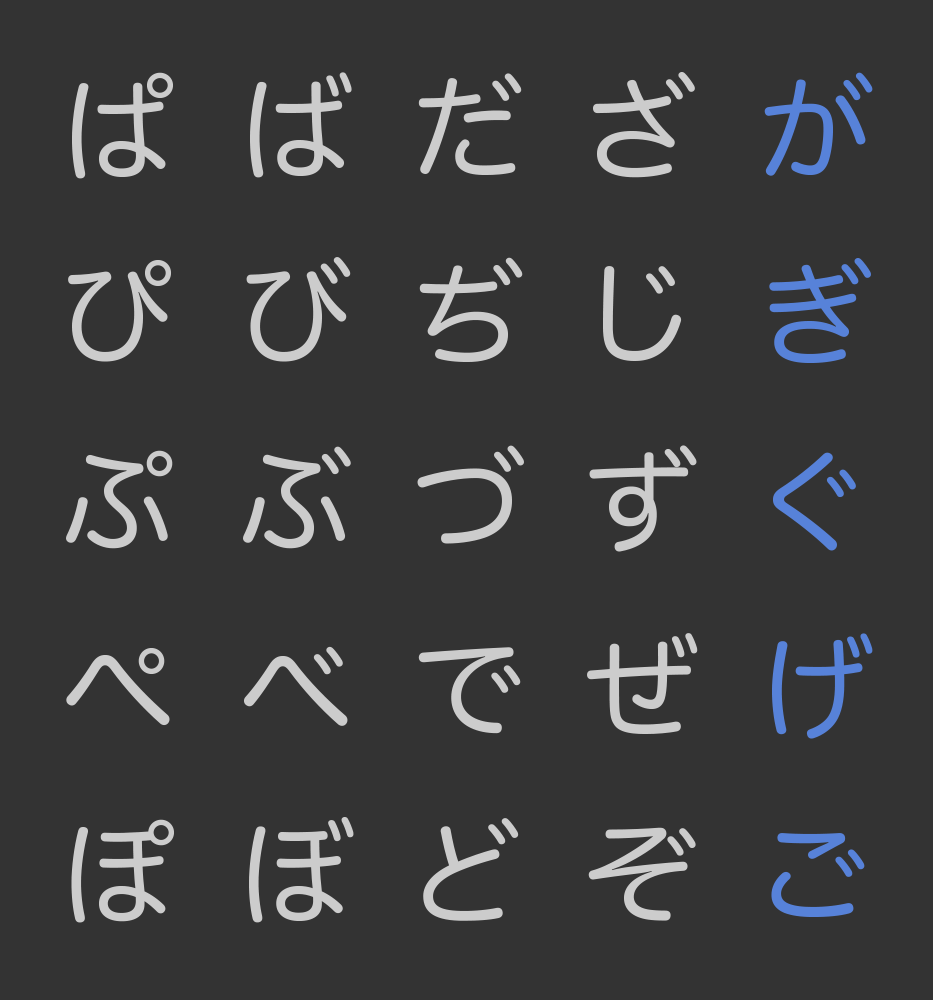
<style>
.page{position:relative;width:933px;height:1000px;background:#333333}
.page>*{position:absolute;margin:0}
.t1{font:113.7px "HiraMaruPro-W4";letter-spacing:0.025em;color:#cccccc}
.t2{font:113.7px "HiraMaruPro-W4";letter-spacing:0.025em;color:#5782d9}
</style>
<div class="page">
<p class="t1" style="left:72px;top:72px;width:102px;height:107px">ぱ</p>
<p class="t1" style="left:250px;top:72px;width:102px;height:106px">ば</p>
<p class="t1" style="left:418px;top:73px;width:104px;height:102px">だ</p>
<p class="t1" style="left:593px;top:72px;width:102px;height:106px">ざ</p>
<p class="t2" style="left:764px;top:72px;width:109px;height:104px">が</p>
<p class="t1" style="left:246px;top:257px;width:105px;height:105px">び</p>
<p class="t1" style="left:419px;top:257px;width:104px;height:105px">ぢ</p>
<p class="t1" style="left:68px;top:260px;width:104px;height:102px">ぴ</p>
<p class="t1" style="left:603px;top:266px;width:79px;height:95px">じ</p>
<p class="t2" style="left:769px;top:258px;width:102px;height:105px">ぎ</p>
<p class="t1" style="left:243px;top:446px;width:108px;height:103px">ぶ</p>
<p class="t1" style="left:417px;top:445px;width:107px;height:99px">づ</p>
<p class="t1" style="left:589px;top:445px;width:108px;height:107px">ず</p>
<p class="t1" style="left:66px;top:450px;width:107px;height:99px">ぷ</p>
<p class="t2" style="left:773px;top:452px;width:83px;height:99px">ぐ</p>
<p class="t1" style="left:587px;top:633px;width:111px;height:101px">ぜ</p>
<p class="t2" style="left:772px;top:633px;width:101px;height:106px">げ</p>
<p class="t1" style="left:66px;top:648px;width:104px;height:78px">ぺ</p>
<p class="t1" style="left:243px;top:646px;width:105px;height:80px">べ</p>
<p class="t1" style="left:418px;top:647px;width:103px;height:87px">で</p>
<p class="t1" style="left:71px;top:819px;width:104px;height:104px">ぽ</p>
<p class="t1" style="left:249px;top:817px;width:105px;height:106px">ぼ</p>
<p class="t1" style="left:423px;top:818px;width:96px;height:103px">ど</p>
<p class="t1" style="left:588px;top:827px;width:108px;height:94px">ぞ</p>
<p class="t2" style="left:771px;top:833px;width:94px;height:84px">ご</p>
</div>
